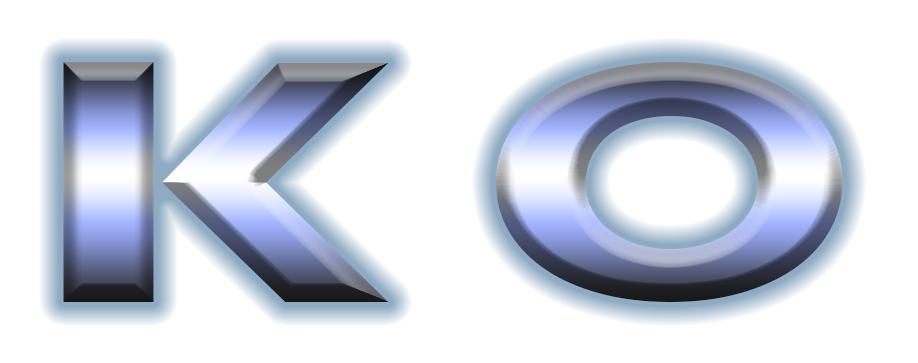
<style>
.page{position:relative;width:918px;height:363px;background:#ffffff}
.page>*{position:absolute;margin:0}
.t1{font:300px "ROBO";scale:1.6 1}
</style>
<div class="page">
<p class="t1" style="left:63px;top:62px;width:780px;height:240px">K O</p>
</div>
